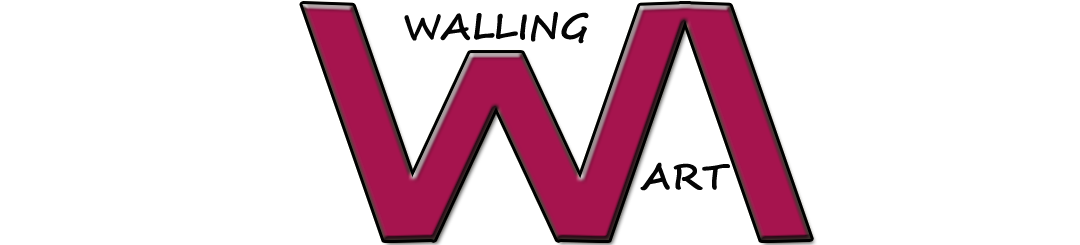
<style>
.page{position:relative;width:1080px;height:245px;background:#ffffff}
.page>*{position:absolute;margin:0}
.t1{font:36px "SegoeScript-Bold";color:#040404}
</style>
<div class="page">
<p class="t1" style="left:404px;top:11px;width:185px;height:33px">WALLING</p>
<p class="t1" style="left:640px;top:162px;width:90px;height:29px">ART</p>
</div>
